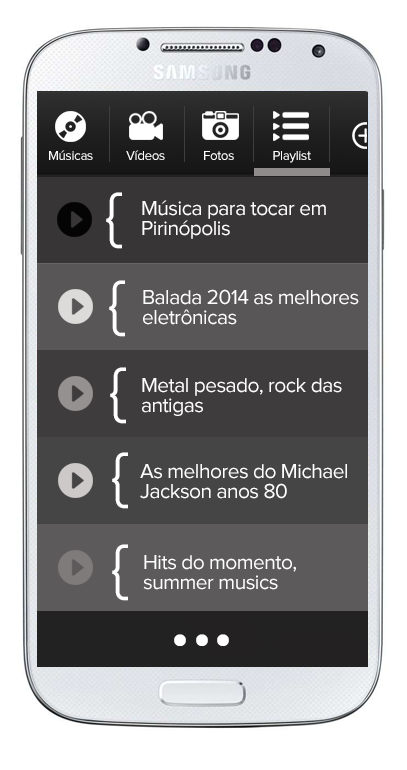
<style>
.page{position:relative;width:407px;height:770px;background:#ffffff}
.page>*{position:absolute;margin:0}
.t1{font:13.4px "ProximaNova-Regular";letter-spacing:-0.025em;color:#ffffff}
.t2{font:64.2px "ProximaNova-Regular";letter-spacing:-0.025em;color:#ffffff}
.t3{font:20.9px/20.1px "ProximaNova-Regular";letter-spacing:-0.025em;color:#ffffff}
.t4{font:104.5px "ProximaNova-Regular";letter-spacing:-0.025em;color:#ffffff}
</style>
<div class="page">
<p class="t1" style="left:49px;top:150px;width:44px;height:10px">Músicas</p>
<p class="t1" style="left:126px;top:150px;width:39px;height:10px">Vídeos</p>
<p class="t1" style="left:204px;top:151px;width:30px;height:9px">Fotos</p>
<p class="t1" style="left:273px;top:151px;width:38px;height:12px">Playlist</p>
<p class="t2" style="left:106px;top:192px;width:16px;height:57px">{</p>
<p class="t3" style="left:142px;top:200px;width:184px;height:39px">Música para tocar em <br>Pirinópolis</p>
<p class="t2" style="left:109px;top:280px;width:16px;height:57px">{</p>
<p class="t3" style="left:143px;top:289px;width:216px;height:36px">Balada 2014 as melhores<br>eletrônicas</p>
<p class="t2" style="left:110px;top:367px;width:16px;height:57px">{</p>
<p class="t3" style="left:142px;top:378px;width:200px;height:38px">Metal pesado, rock das<br>antigas</p>
<p class="t2" style="left:112px;top:452px;width:16px;height:57px">{</p>
<p class="t3" style="left:140px;top:464px;width:207px;height:35px">As melhores do Michael<br>Jackson anos 80</p>
<p class="t2" style="left:112px;top:544px;width:16px;height:57px">{</p>
<p class="t3" style="left:143px;top:555px;width:153px;height:35px">Hits do momento,<br>summer musics</p>
<p class="t4" style="left:174px;top:634px;width:55px;height:12px">...</p>
</div>
